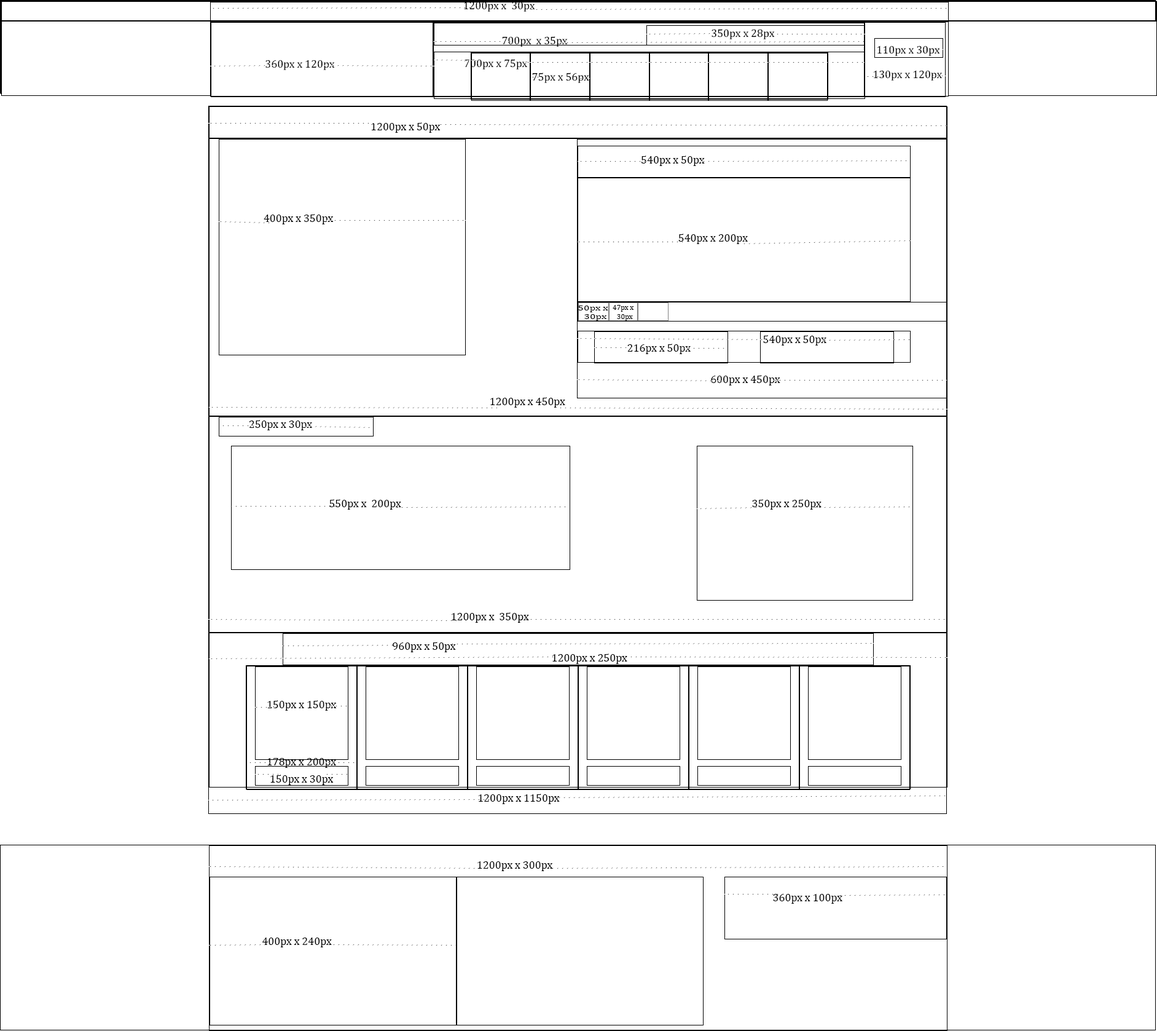
<style>
.page{position:relative;width:1157px;height:1031px;background:#ffffff}
.page>*{position:absolute;margin:0}
.t1{font:11.1px "CambriaMath";color:#000000}
.t2{font:7.4px "CambriaMath";color:#000000;scale:1.44 1}
.t3{font:7.4px "CambriaMath";color:#000000}
</style>
<div class="page">
<p class="t1" style="left:464px;top:1px;width:71px;height:11px">1200px x  30px</p>
<p class="t1" style="left:712px;top:29px;width:63px;height:10px">350px x 28px</p>
<p class="t1" style="left:502px;top:36px;width:66px;height:11px">700px  x 35px</p>
<p class="t1" style="left:877px;top:45px;width:63px;height:11px">110px x 30px</p>
<p class="t1" style="left:265px;top:60px;width:70px;height:10px">360px x 120px</p>
<p class="t1" style="left:465px;top:59px;width:62px;height:10px">700px x 75px</p>
<p class="t1" style="left:532px;top:73px;width:57px;height:10px">75px x 56px</p>
<p class="t1" style="left:873px;top:70px;width:69px;height:11px">130px x 120px</p>
<p class="t1" style="left:371px;top:122px;width:70px;height:11px">1200px x 50px</p>
<p class="t1" style="left:642px;top:155px;width:63px;height:11px">540px x 50px</p>
<p class="t1" style="left:264px;top:214px;width:70px;height:10px">400px x 350px</p>
<p class="t1" style="left:678px;top:234px;width:70px;height:10px">540px x 200px</p>
<p class="t2" style="left:578px;top:305px;width:30px;height:16px;text-align:center">50px x<br>  30px</p>
<p class="t3" style="left:613px;top:305px;width:21px;height:16px;text-align:center">47px x <br> 30px</p>
<p class="t1" style="left:763px;top:335px;width:64px;height:10px">540px x 50px</p>
<p class="t1" style="left:627px;top:344px;width:64px;height:10px">216px x 50px</p>
<p class="t1" style="left:711px;top:375px;width:69px;height:10px">600px x 450px</p>
<p class="t1" style="left:490px;top:397px;width:75px;height:10px">1200px x 450px</p>
<p class="t1" style="left:249px;top:420px;width:63px;height:10px">250px x 30px</p>
<p class="t1" style="left:329px;top:499px;width:72px;height:10px">550px x  200px</p>
<p class="t1" style="left:752px;top:499px;width:70px;height:10px">350px x 250px</p>
<p class="t1" style="left:452px;top:612px;width:77px;height:10px">1200px x  350px</p>
<p class="t1" style="left:393px;top:642px;width:63px;height:10px">960px x 50px</p>
<p class="t1" style="left:552px;top:653px;width:75px;height:11px">1200px x 250px</p>
<p class="t1" style="left:267px;top:700px;width:70px;height:10px">150px x 150px</p>
<p class="t1" style="left:267px;top:758px;width:69px;height:10px">178px x 200px</p>
<p class="t1" style="left:270px;top:774px;width:64px;height:11px">150px x 30px</p>
<p class="t1" style="left:478px;top:793px;width:82px;height:11px">1200px x 1150px</p>
<p class="t1" style="left:477px;top:861px;width:76px;height:10px">1200px x 300px</p>
<p class="t1" style="left:773px;top:893px;width:69px;height:10px">360px x 100px</p>
<p class="t1" style="left:262px;top:937px;width:70px;height:10px">400px x 240px</p>
</div>
